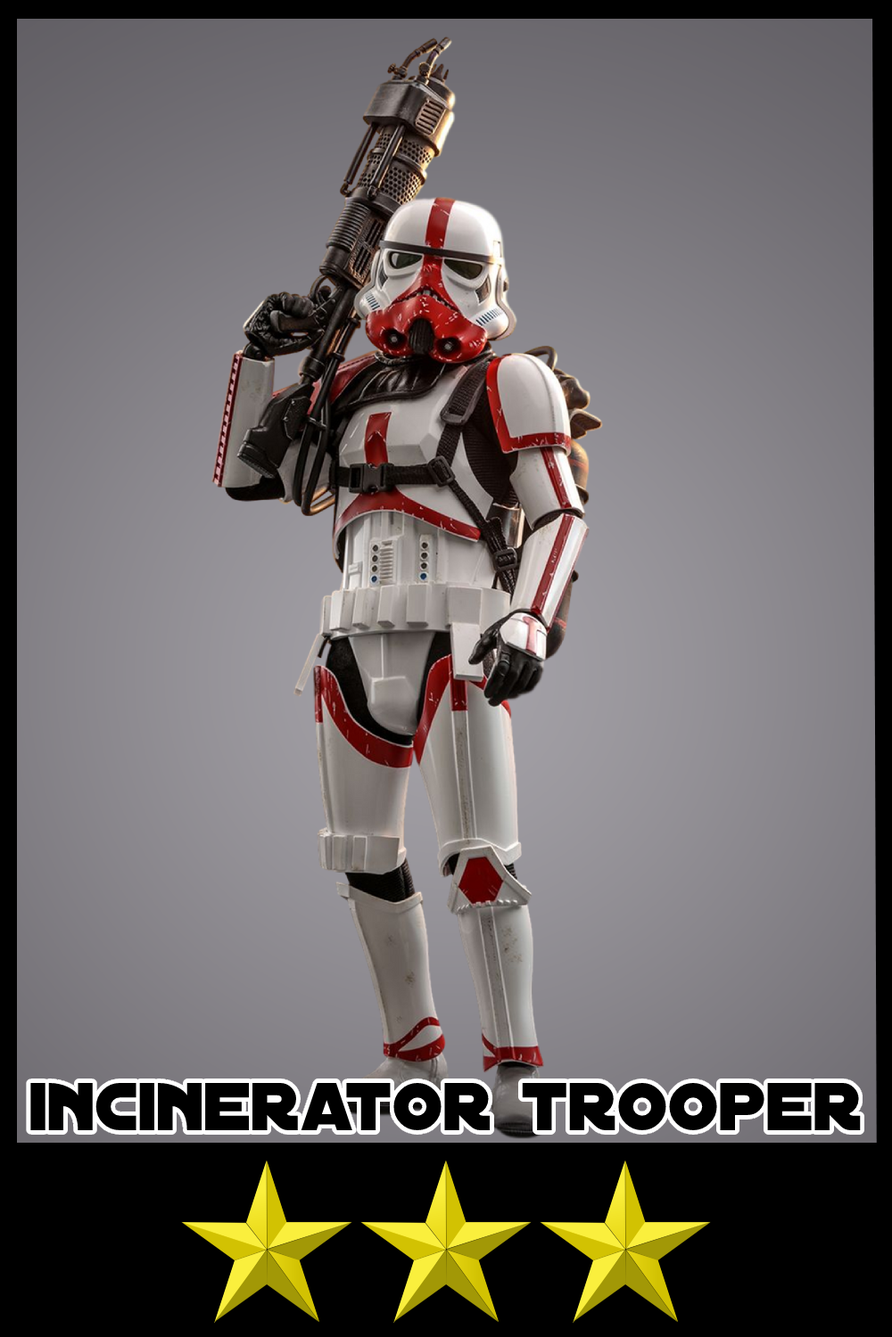
<style>
.page{position:relative;width:892px;height:1337px}
.page>*{position:absolute;margin:0}
.t1{font:72.7px "DistantGalaxy";color:#000000}
</style>
<div class="page">
<p class="t1" style="left:30px;top:1083px;width:830px;height:48px">incinerator trooper</p>
</div>
